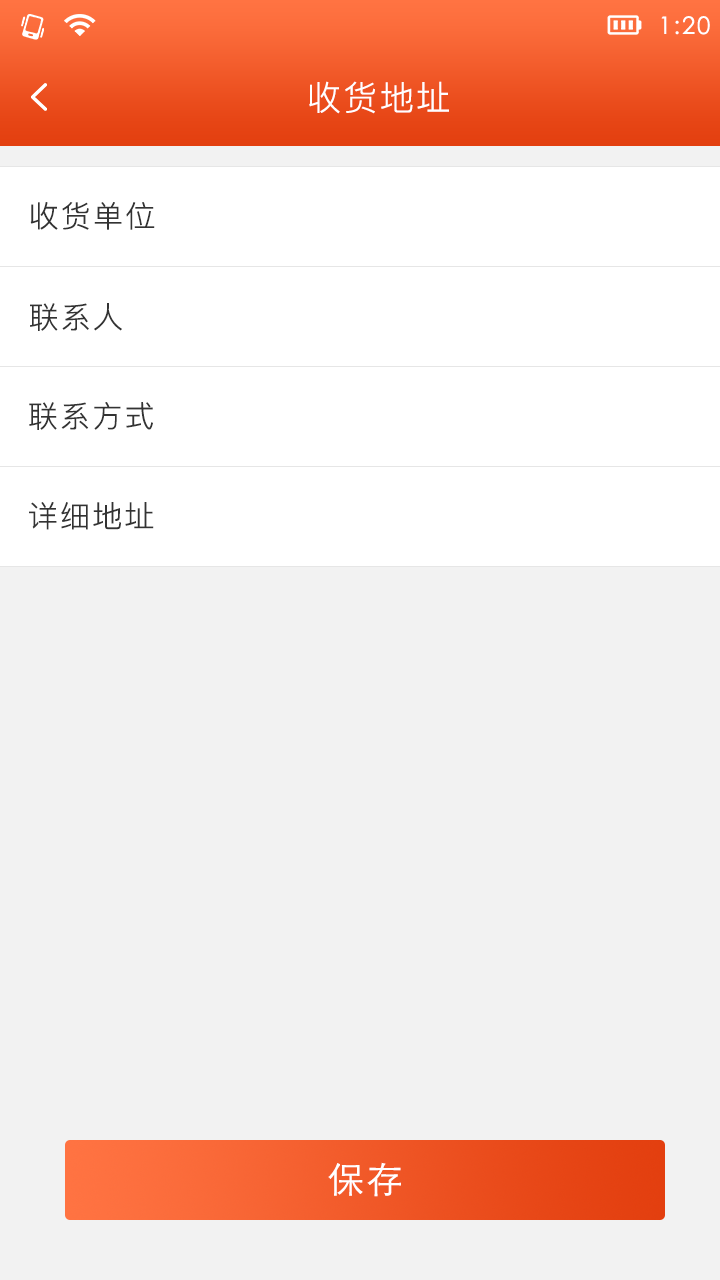
<style>
.page{position:relative;width:720px;height:1280px;background:#f2f2f2}
.page>*{position:absolute;margin:0}
.t1{font:24px "STXihei";letter-spacing:0.075em;color:#ffffff}
.t2{font:34px "PingFangSC-Light";letter-spacing:0.075em;color:#ffffff}
.t3{font:30px "PingFangSC-Light";letter-spacing:0.075em;color:#333333}
.t4{font:36px "STHeitiSC-Light";letter-spacing:0.075em;color:#ffffff}
</style>
<div class="page">
<p class="t1" style="left:661px;top:16px;width:49px;height:19px">1:20</p>
<p class="t2" style="left:309px;top:81px;width:140px;height:33px">收货地址</p>
<p class="t3" style="left:30px;top:202px;width:125px;height:28px">收货单位</p>
<p class="t3" style="left:30px;top:303px;width:92px;height:28px">联系人</p>
<p class="t3" style="left:29px;top:402px;width:124px;height:28px">联系方式</p>
<p class="t3" style="left:29px;top:502px;width:125px;height:28px">详细地址</p>
<p class="t4" style="left:328px;top:1162px;width:73px;height:35px">保存</p>
</div>
